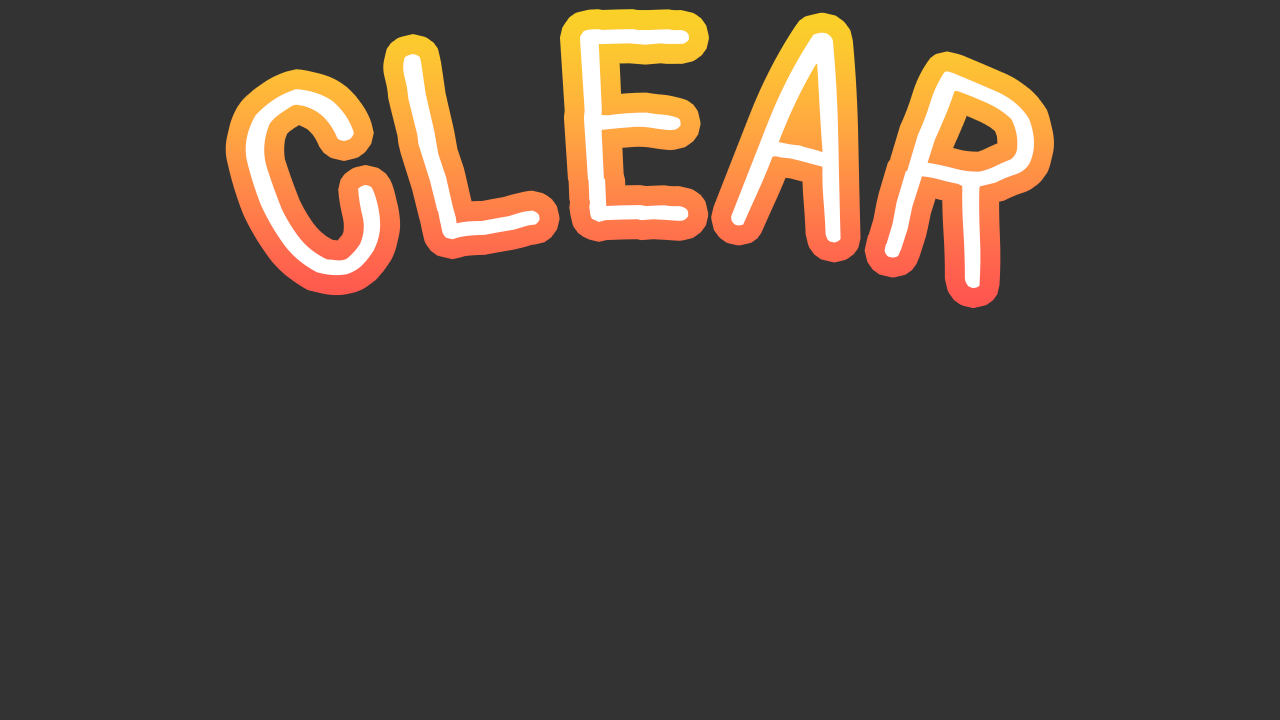
<style>
.page{position:relative;width:1280px;height:720px;background:#333333}
.page>*{position:absolute;margin:0}
.t1{font:250px "azuki_font";letter-spacing:0.05em;color:#ffffff}
</style>
<div class="page">
<p class="t1" style="left:245px;top:29px;width:789px;height:259px">CLEAR</p>
</div>
